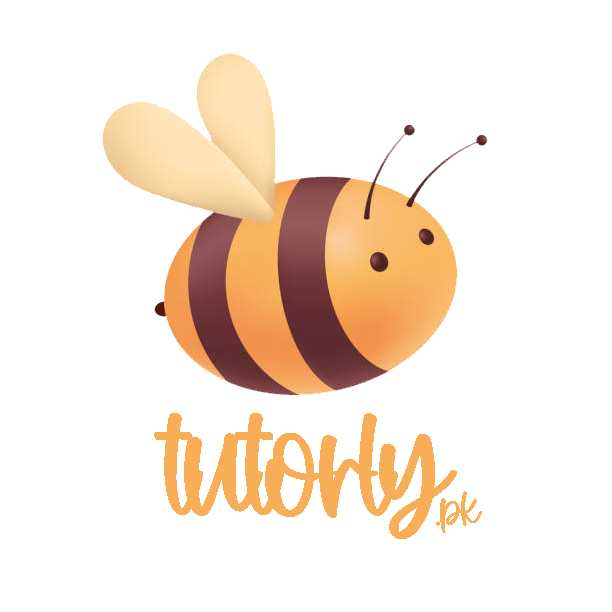
<style>
.page{position:relative;width:612px;height:612px;background:#ffffff}
.page>*{position:absolute;margin:0}
.t1{font:168.4px "CandyCaneRegular";letter-spacing:-0.05em;color:#f8ae57}
.t2{font:54.9px "CandyCaneRegular";letter-spacing:-0.05em;color:#f8ae57}
</style>
<div class="page">
<p class="t1" style="left:154px;top:413px;width:303px;height:126px">tutorly</p>
<p class="t2" style="left:436px;top:491px;width:46px;height:42px">.pk</p>
</div>
